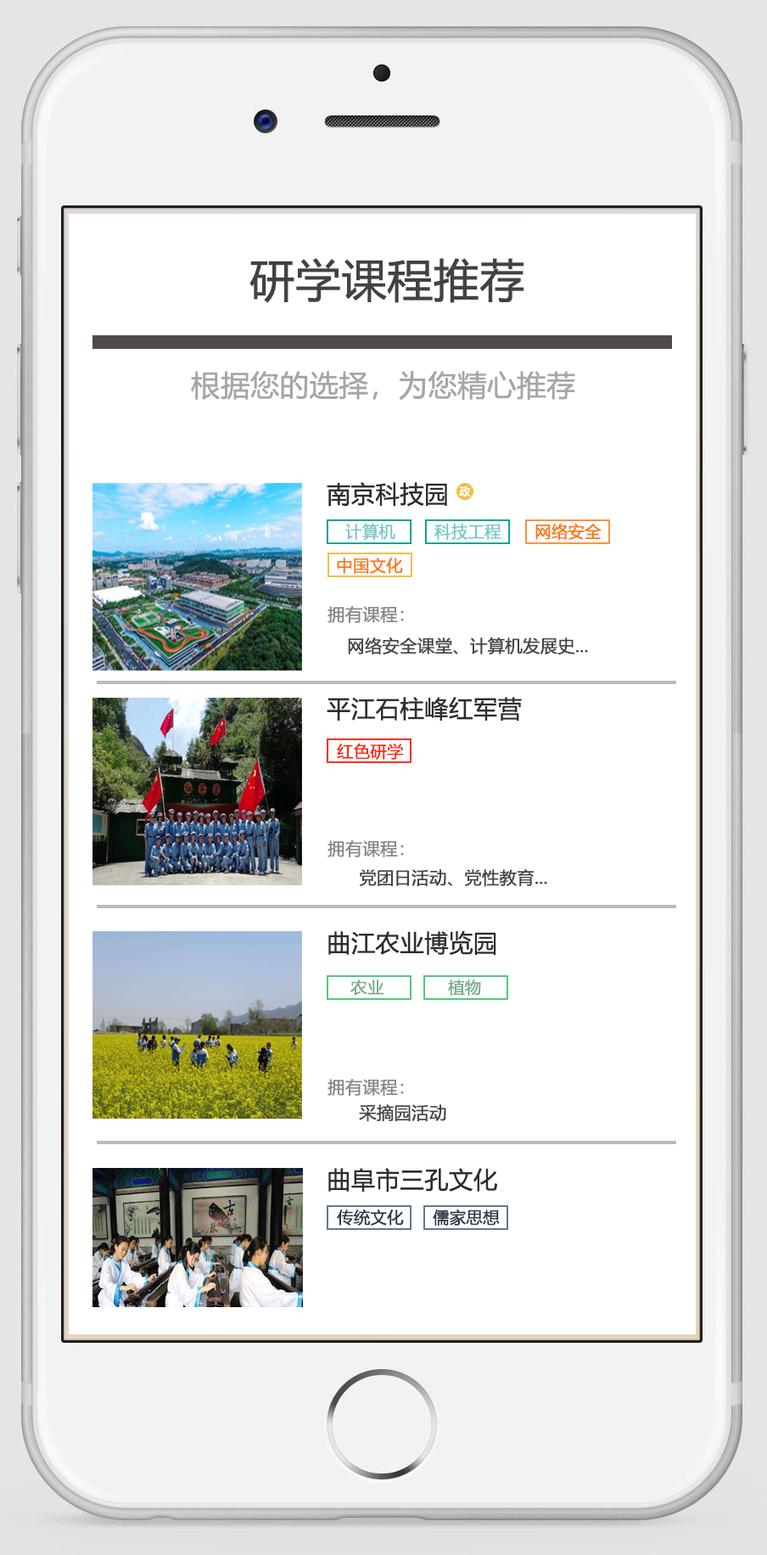
<style>
.page{position:relative;width:767px;height:1555px;background:#ffffff}
.page>*{position:absolute;margin:0}
.t1{font:45.3px "MicrosoftYaHei";letter-spacing:-0.01em;color:#444144;font-weight:bold}
.t2{font:29.1px "MicrosoftYaHei";letter-spacing:-0.01em;color:#a6a6a6;font-weight:bold}
.t3{font:24px "MicrosoftYaHei";letter-spacing:-0.01em;color:#2d2d2d;font-weight:bold}
.t4{font:11.3px "MicrosoftYaHei";letter-spacing:-0.01em;color:#ffffff;font-weight:bold}
.t5{font:16.4px "MicrosoftYaHei";letter-spacing:-0.01em;color:#75c7c8;font-weight:bold}
.t6{font:16.4px "MicrosoftYaHei";letter-spacing:-0.01em;color:#f9770e;font-weight:bold}
.t7{font:17.3px "MicrosoftYaHei";letter-spacing:-0.01em;color:#898989;font-weight:bold}
.t8{font:17.3px "MicrosoftYaHei";letter-spacing:-0.01em;color:#444444;font-weight:bold}
.t9{font:16.4px "MicrosoftYaHei";letter-spacing:-0.01em;color:#f9290e;font-weight:bold}
.t10{font:16.4px "MicrosoftYaHei";letter-spacing:-0.01em;color:#75ad8a;font-weight:bold}
.t11{font:16.4px "MicrosoftYaHei";letter-spacing:-0.01em;color:#2c3845;font-weight:bold}
</style>
<div class="page">
<p class="t1" style="left:249px;top:258px;width:275px;height:45px">研学课程推荐</p>
<p class="t2" style="left:191px;top:371px;width:384px;height:30px">根据您的选择，为您精心推荐</p>
<p class="t3" style="left:327px;top:482px;width:120px;height:25px">南京科技园</p>
<p class="t4" style="left:459px;top:485px;width:12px;height:12px">政</p>
<p class="t5" style="left:345px;top:523px;width:50px;height:17px">计算机</p>
<p class="t5" style="left:434px;top:523px;width:67px;height:17px">科技工程</p>
<p class="t6" style="left:535px;top:523px;width:67px;height:17px">网络安全</p>
<p class="t6" style="left:337px;top:557px;width:66px;height:17px">中国文化</p>
<p class="t7" style="left:328px;top:606px;width:76px;height:17px">拥有课程：</p>
<p class="t8" style="left:348px;top:636px;width:240px;height:19px">网络安全课堂、计算机发展史...</p>
<p class="t3" style="left:327px;top:697px;width:195px;height:24px">平江石柱峰红军营</p>
<p class="t9" style="left:337px;top:742px;width:67px;height:17px">红色研学</p>
<p class="t7" style="left:328px;top:840px;width:76px;height:17px">拥有课程：</p>
<p class="t8" style="left:359px;top:869px;width:188px;height:18px">党团日活动、党性教育...</p>
<p class="t3" style="left:328px;top:931px;width:168px;height:24px">曲江农业博览园</p>
<p class="t10" style="left:350px;top:979px;width:34px;height:16px">农业</p>
<p class="t10" style="left:448px;top:979px;width:33px;height:16px">植物</p>
<p class="t7" style="left:328px;top:1078px;width:76px;height:17px">拥有课程：</p>
<p class="t8" style="left:359px;top:1104px;width:87px;height:17px">采摘园活动</p>
<p class="t3" style="left:328px;top:1168px;width:169px;height:23px">曲阜市三孔文化</p>
<p class="t11" style="left:337px;top:1208px;width:67px;height:17px">传统文化</p>
<p class="t11" style="left:433px;top:1208px;width:67px;height:17px">儒家思想</p>
</div>
